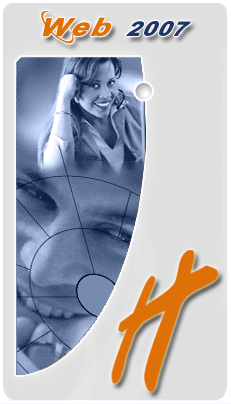
<style>
.page{position:relative;width:231px;height:404px;background:#dfdfdf}
.page>*{position:absolute;margin:0}
.t1{font:24px "13Misa";color:#1f3662}
.t2{font:30px "13Misa";color:#de7008}
</style>
<div class="page">
<p class="t1" style="left:41px;top:11px;width:150px;height:33px"><span class="t2">Web </span>2007</p>
</div>
